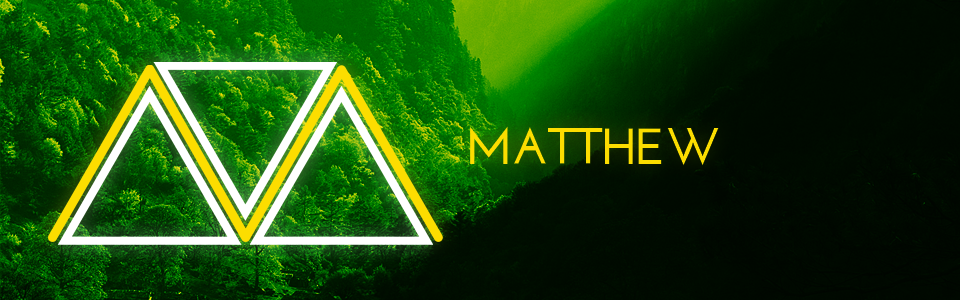
<style>
.page{position:relative;width:960px;height:300px}
.page>*{position:absolute;margin:0}
.t1{font:50.6px "JosefinSans-Bold";letter-spacing:-0.023em;color:#fcdd00;text-transform:uppercase}
</style>
<div class="page">
<p class="t1" style="left:470px;top:126px;width:249px;height:40px">Matthew</p>
</div>
